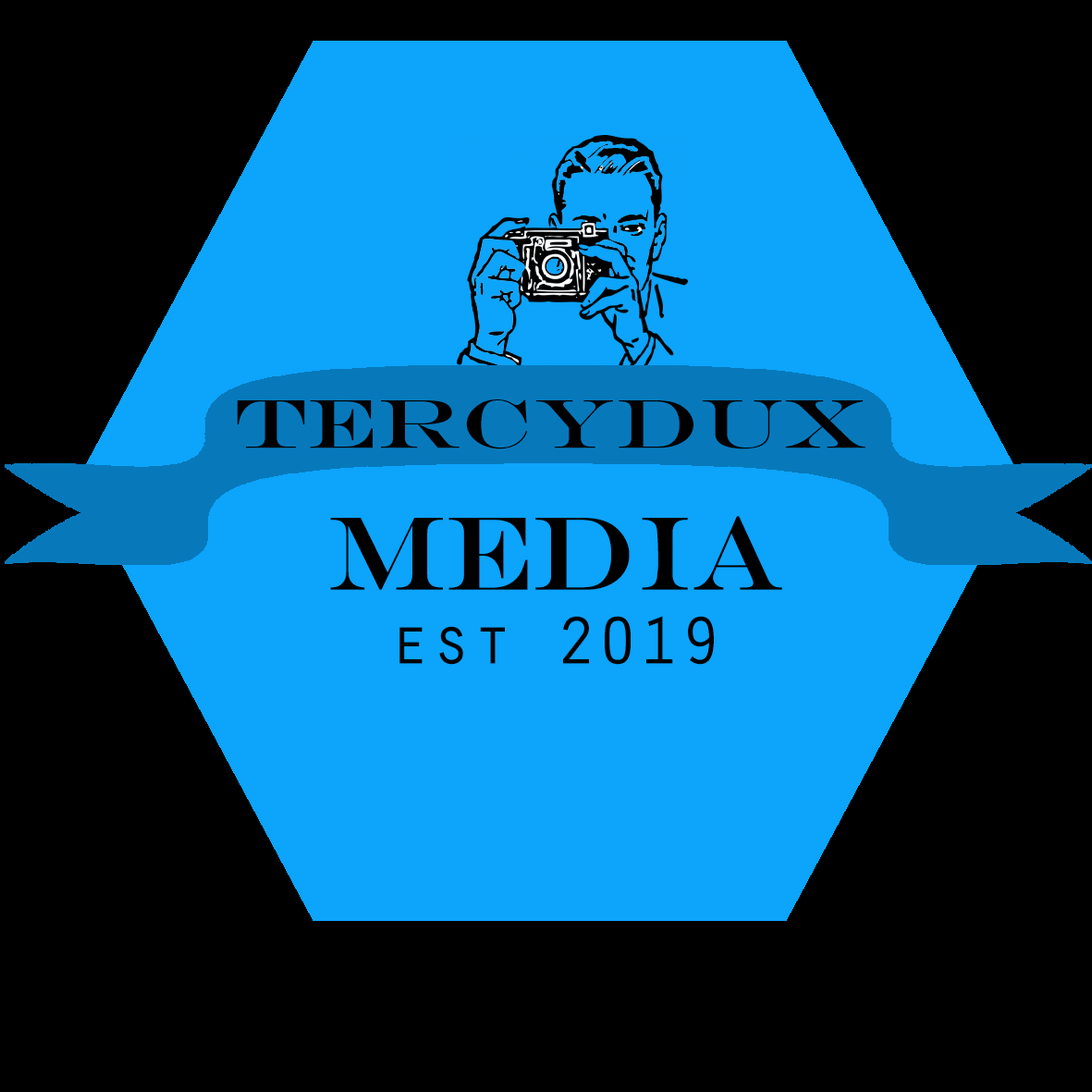
<style>
.page{position:relative;width:1092px;height:1092px;background:#000000}
.page>*{position:absolute;margin:0}
.t1{font:69.5px "EngraversMT";color:#000000;scale:1.21 1}
.t2{font:105.1px "EngraversMT";color:#000000}
.t3{font:69.3px "OratorStd";color:#000000}
</style>
<div class="page">
<p class="t1" style="left:237px;top:399px;width:628px;height:50px">tercydux</p>
<p class="t2" style="left:330px;top:516px;width:452px;height:74px">media</p>
<p class="t3" style="left:399px;top:616px;width:315px;height:49px">est 2019</p>
</div>
